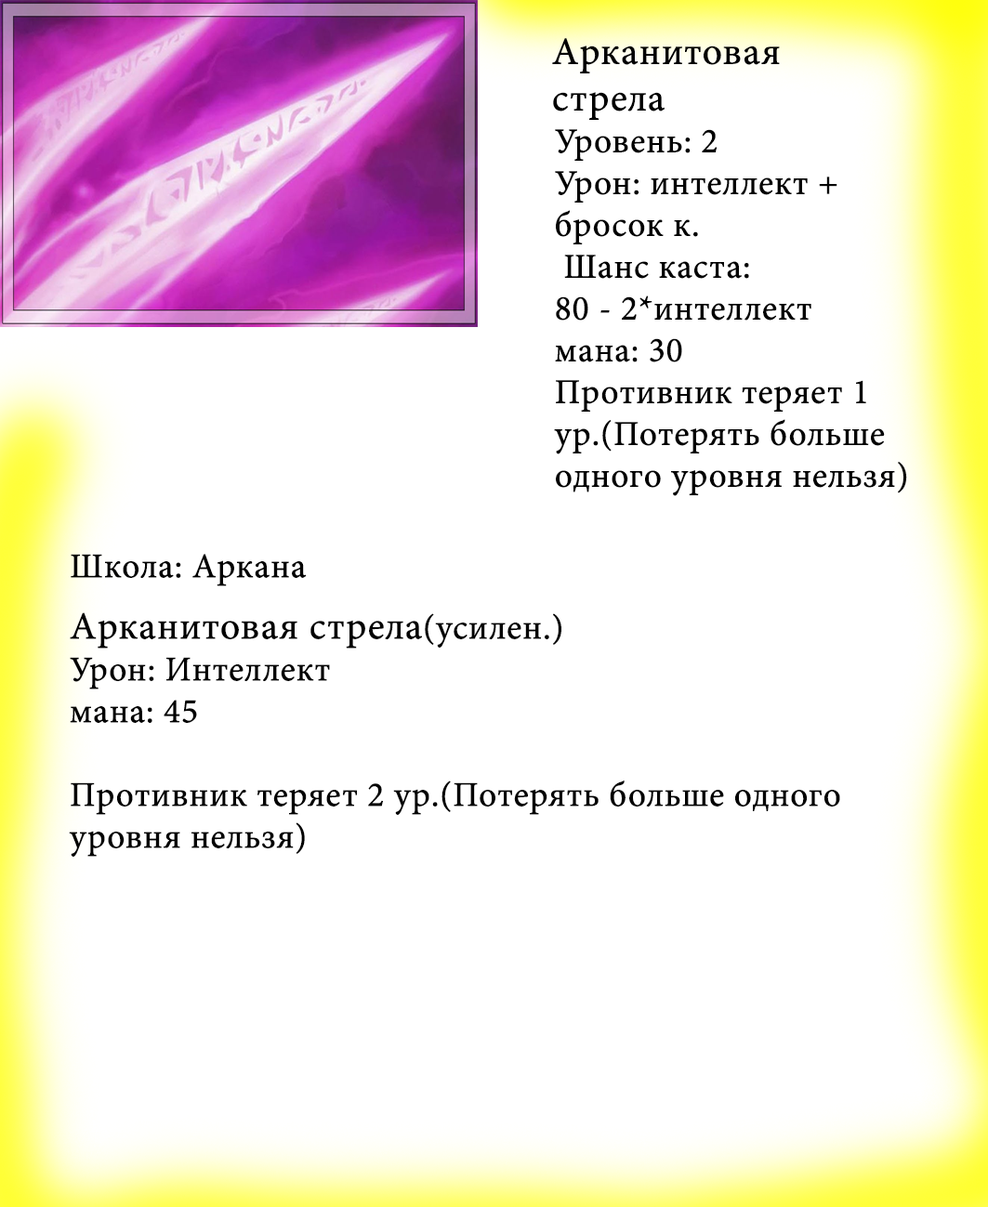
<style>
.page{position:relative;width:988px;height:1207px;background:#ffffff}
.page>*{position:absolute;margin:0}
.t1{font:38.7px "MinionPro-Regular";color:#000000;font-weight:bold}
.t2{font:34.8px "MinionPro-Regular";color:#000000;font-weight:bold}
</style>
<div class="page">
<p class="t1" style="left:552px;top:38px;width:228px;height:82px">Арканитовая стрела</p>
<p class="t2" style="left:554px;top:129px;width:353px;height:367px">Уровень: 2<br>Урон: интеллект + бросок к.<br> Шанс каста: <br>80 - 2*интеллект <br>мана: 30<br>Противник теряет 1 ур.(Потерять больше одного уровня нельзя)</p>
<p class="t2" style="left:71px;top:554px;width:236px;height:32px">Школа: Аркана</p>
<p class="t2" style="left:69px;top:612px;width:771px;height:245px"><span class="t1">Арканитовая стрела</span>(усилен.)<br>Урон: Интеллект <br>мана: 45<br><br>Противник теряет 2 ур.(Потерять больше одного уровня нельзя)</p>
</div>
